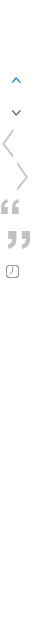
<style>
.page{position:relative;width:32px;height:640px;background:#ffffff}
.page>*{position:absolute;margin:0}
.t1{font:17.6px "MicrosoftYaHei";letter-spacing:0.06em;color:#0d7acd;scale:0.62 1}
.t2{font:17.6px "MicrosoftYaHei";letter-spacing:0.06em;color:#595757;scale:0.62 1}
.t3{font:61.3px "MicrosoftYaHeiLight";letter-spacing:0.06em;color:#c5c5c5;scale:0.39 1}
.t4{font:48px "Arial-BoldMT";color:#c1c1c1}
.t5{font:60px "Arial-BoldMT";color:#c1c1c1}
</style>
<div class="page">
<p class="t1" style="left:11px;top:77px;width:10px;height:6px;rotate:90deg">&lt;</p>
<p class="t2" style="left:11px;top:110px;width:10px;height:6px;rotate:-90deg">&lt;</p>
<p class="t3" style="left:2px;top:129px;width:12px;height:29px;rotate:180deg">&gt;</p>
<p class="t3" style="left:17px;top:162px;width:11px;height:29px">&gt;</p>
<p class="t4" style="left:1px;top:199px;width:19px;height:15px">“</p>
<p class="t5" style="left:7px;top:231px;width:24px;height:18px;rotate:-180deg">“</p>
</div>
